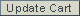
<style>
.page{position:relative;width:80px;height:16px;background:#d7d8ca}
.page>*{position:absolute;margin:0}
.t1{font:11px "ArialMT";letter-spacing:0.05em;color:#3c464e}
</style>
<div class="page">
<p class="t1" style="left:7px;top:4px;width:64px;height:10px">Update Cart</p>
</div>
